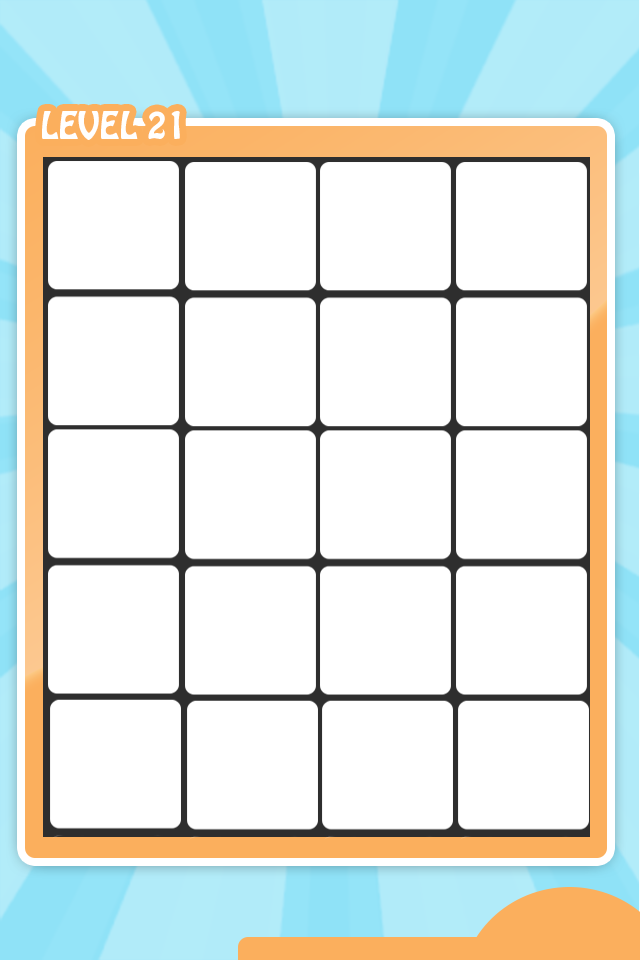
<style>
.page{position:relative;width:640px;height:960px;background:#ffffff}
.page>*{position:absolute;margin:0}
.t1{font:33.3px "HoboStd";color:#fffffe}
</style>
<div class="page">
<p class="t1" style="left:42px;top:111px;width:138px;height:29px">LEVEL 21</p>
</div>
